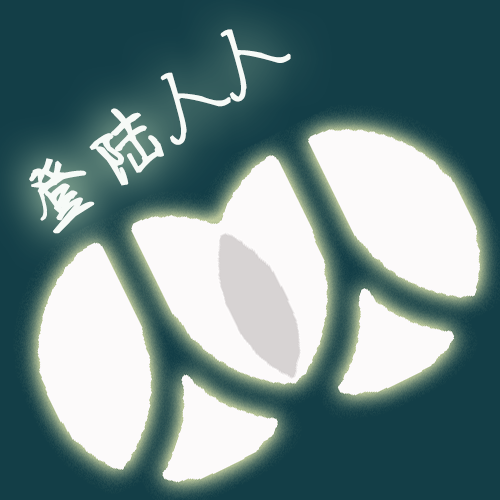
<style>
.page{position:relative;width:500px;height:500px;background:#133e47}
.page>*{position:absolute;margin:0}
.t1{font:72px "Ò¶¸ùÓÑ·ÇÖ÷Á÷ÊÖÐ´";color:#f6faf7;font-weight:bold}
</style>
<div class="page">
<p class="t1" style="left:29px;top:29px;width:262px;height:205px;rotate:-36deg">登陆人人</p>
</div>
